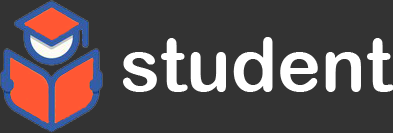
<style>
.page{position:relative;width:393px;height:133px;background:#333333}
.page>*{position:absolute;margin:0}
.t1{font:74px "ArialRoundedMTBold";color:#ffffff}
</style>
<div class="page">
<p class="t1" style="left:123px;top:37px;width:271px;height:55px">student</p>
</div>
